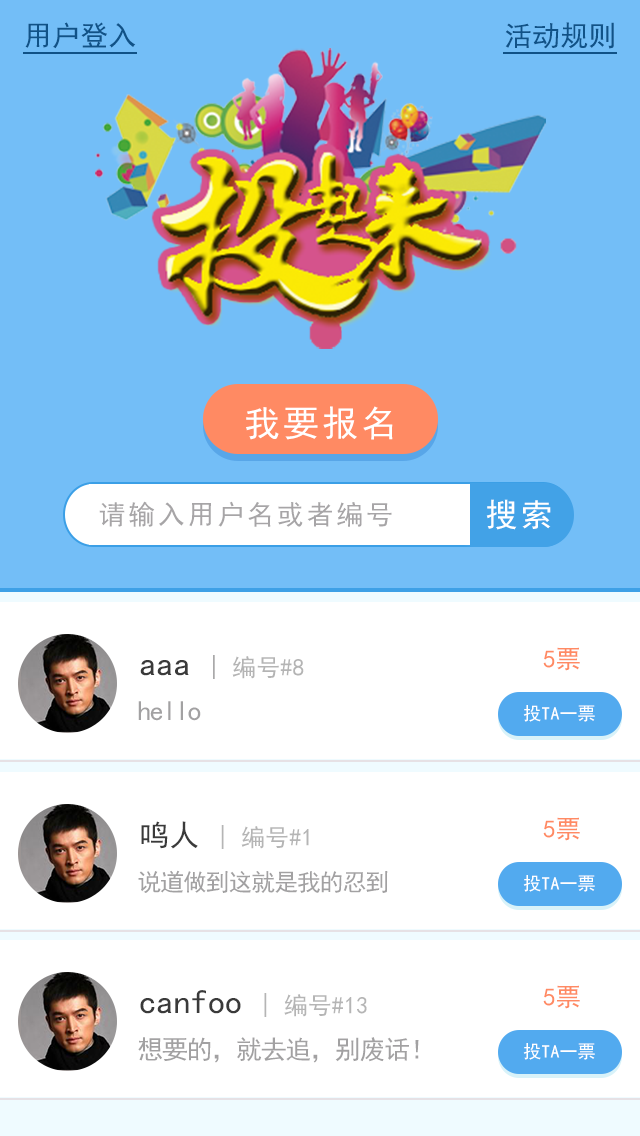
<style>
.page{position:relative;width:640px;height:1136px;background:#ffffff}
.page>*{position:absolute;margin:0}
.t1{font:28px "SimHei";letter-spacing:0.005em;color:#105287}
.t2{font:35.7px "SimHei";letter-spacing:0.1em;color:#ffffff}
.t3{font:27px "SimHei";letter-spacing:0.1em;color:#a7a5a7}
.t4{font:32px "SimHei";letter-spacing:0.1em;color:#ffffff}
.t5{font:25px "SimHei";letter-spacing:0.005em;color:#ff8a63}
.t6{font:24px "SimHei";letter-spacing:0.005em;color:#b4b4b4}
.t7{font:34px "SimHei";letter-spacing:0.005em;color:#3a393a}
.t8{font:24px "SimHei";letter-spacing:0.005em;color:#aaa9aa}
.t9{font:28px "SimHei";letter-spacing:-0.05em;color:#a2a1a2}
.t10{font:18px "SimHei";letter-spacing:0.005em;color:#ffffff}
.t11{font:24px "SimHei";letter-spacing:0.005em;color:#b5b5b5}
.t12{font:30px "SimHei";letter-spacing:0.005em;color:#3a393a}
.t13{font:24px "SimHei";letter-spacing:-0.05em;color:#a2a1a2}
.t14{font:26px "SimHei";letter-spacing:-0.05em;color:#a2a1a2}
</style>
<div class="page">
<p class="t1" style="left:25px;top:22px;width:111px;height:27px">用户登入</p>
<p class="t1" style="left:505px;top:22px;width:109px;height:27px">活动规则</p>
<p class="t2" style="left:246px;top:406px;width:147px;height:34px">我要报名</p>
<p class="t3" style="left:99px;top:501px;width:293px;height:26px">请输入用户名或者编号</p>
<p class="t4" style="left:486px;top:499px;width:65px;height:31px">搜索</p>
<p class="t5" style="left:543px;top:647px;width:37px;height:24px">5票</p>
<p class="t6" style="left:140px;top:655px;width:164px;height:24px"><span class="t7">aaa </span><span class="t8">|</span> 编号#8</p>
<p class="t9" style="left:138px;top:701px;width:63px;height:20px">hello</p>
<p class="t10" style="left:523px;top:705px;width:72px;height:17px">投TA一票</p>
<p class="t11" style="left:141px;top:821px;width:168px;height:28px"><span class="t12">鸣人 </span>| 编号#1</p>
<p class="t5" style="left:543px;top:817px;width:37px;height:24px">5票</p>
<p class="t13" style="left:138px;top:870px;width:250px;height:23px">说道做到这就是我的忍到</p>
<p class="t10" style="left:523px;top:875px;width:72px;height:17px">投TA一票</p>
<p class="t11" style="left:140px;top:990px;width:227px;height:27px"><span class="t7">canfoo </span>| 编号#13</p>
<p class="t5" style="left:543px;top:985px;width:37px;height:24px">5票</p>
<p class="t14" style="left:138px;top:1037px;width:281px;height:26px">想要的，就去追，别废话！</p>
<p class="t10" style="left:523px;top:1043px;width:72px;height:17px">投TA一票</p>
</div>
